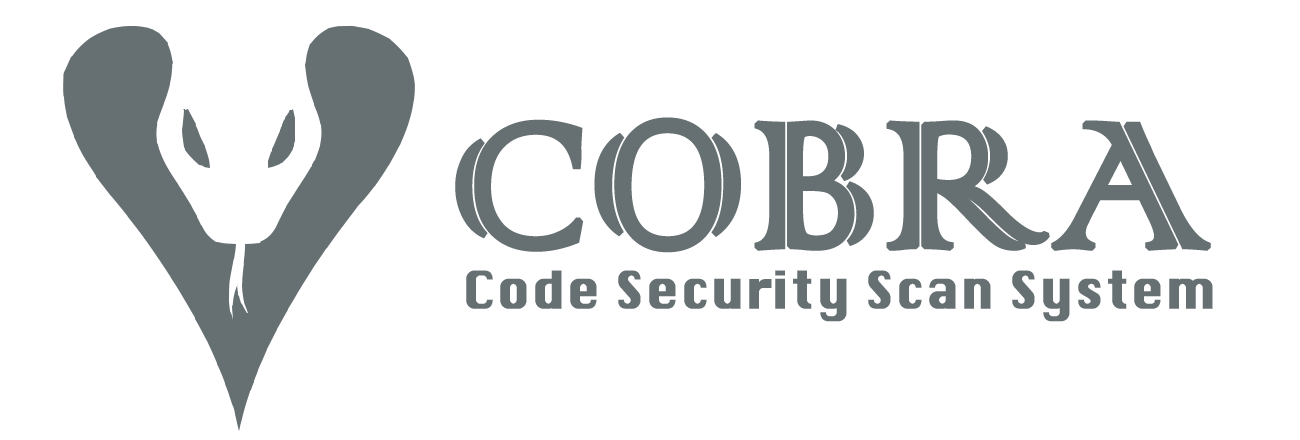
<style>
.page{position:relative;width:1300px;height:440px;background:#ffffff}
.page>*{position:absolute;margin:0}
.t1{font:235px "ColonnaMT";color:#666f72;font-weight:bold}
.t2{font:50px "Silom";color:#666f72;font-weight:bold}
</style>
<div class="page">
<p class="t1" style="left:455px;top:117px;width:756px;height:136px">COBRA</p>
<p class="t2" style="left:466px;top:270px;width:747px;height:52px">Code Security Scan System</p>
</div>
